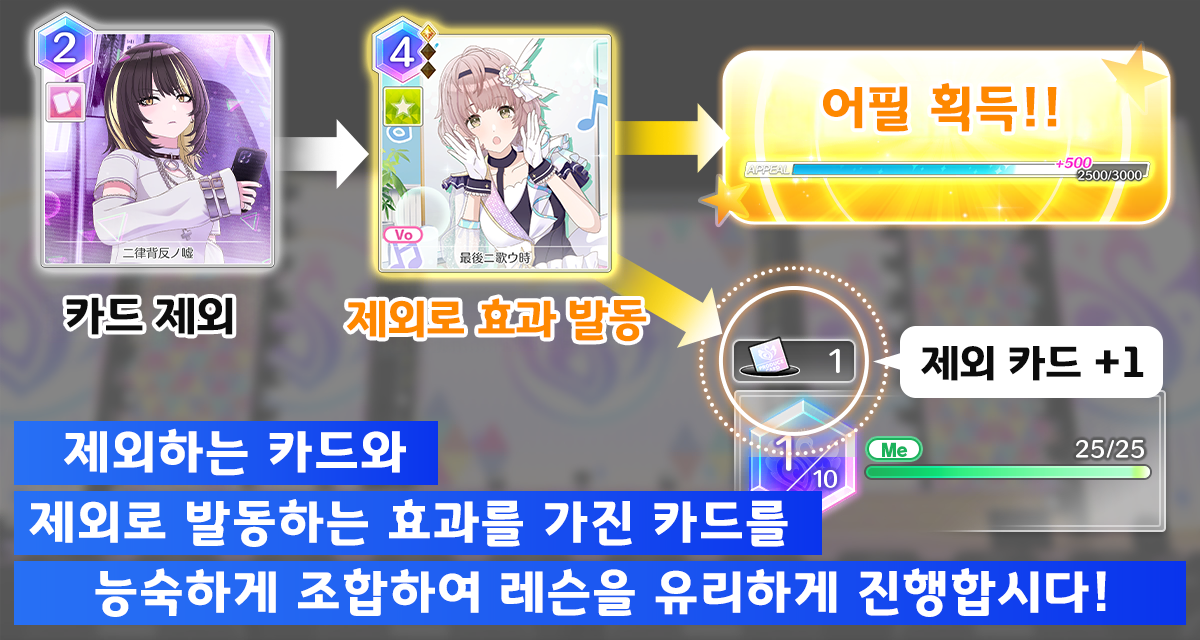
<style>
.page{position:relative;width:1200px;height:640px}
.page>*{position:absolute;margin:0}
.t1{font:50.7px "GyeonggiTitleB";letter-spacing:0.05em;color:#fe8800}
.t2{font:45.3px "GyeonggiTitleB";color:#0c0c0c}
.t3{font:45.3px "GyeonggiTitleB";color:#fe8800}
.t4{font:42.7px "GyeonggiTitleB";color:#0c0c0c}
.t5{font:50.7px "GyeonggiTitleB";letter-spacing:0.05em;color:#ffffff}
</style>
<div class="page">
<p class="t1" style="left:823px;top:83px;width:234px;height:49px">어필 획득!!</p>
<p class="t2" style="left:66px;top:297px;width:167px;height:38px">카드 제외</p>
<p class="t3" style="left:346px;top:298px;width:301px;height:44px">제외로 효과 발동</p>
<p class="t4" style="left:921px;top:346px;width:223px;height:35px">제외 카드 +1</p>
<p class="t5" style="left:64px;top:428px;width:342px;height:48px">제외하는 카드와</p>
<p class="t5" style="left:29px;top:499px;width:759px;height:48px">제외로 발동하는 효과를 가진 카드를</p>
<p class="t5" style="left:95px;top:568px;width:1011px;height:49px">능숙하게 조합하여 레슨을 유리하게 진행합시다!</p>
</div>
